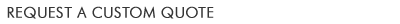
<style>
.page{position:relative;width:400px;height:24px;background:#ffffff}
.page>*{position:absolute;margin:0}
.t1{font:14.7px "FuturaBT-Light";letter-spacing:0.025em;color:#363636;text-transform:uppercase;font-weight:bold}
</style>
<div class="page">
<p class="t1" style="left:7px;top:6px;width:207px;height:13px">REQUEST A CUSTOM QUOTE</p>
</div>
